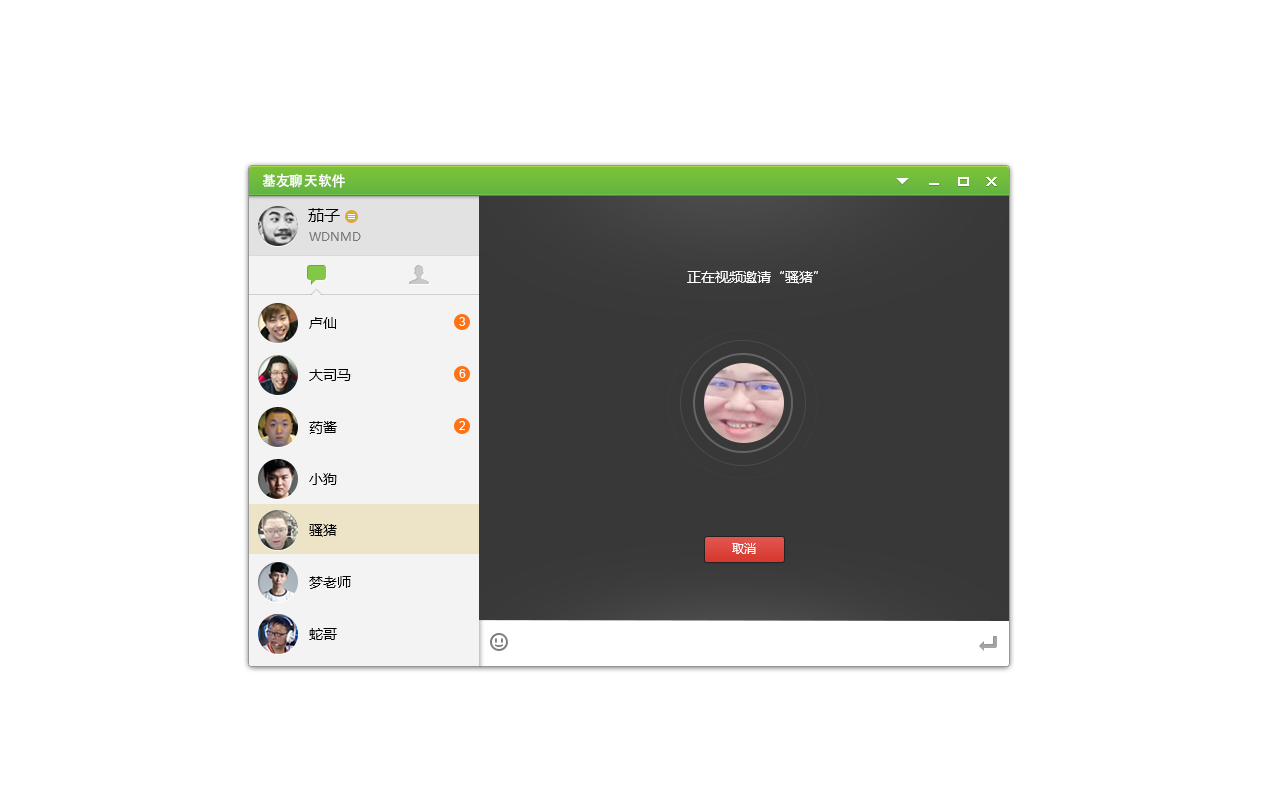
<style>
.page{position:relative;width:1280px;height:800px;background:#ffffff}
.page>*{position:absolute;margin:0}
.t1{font:14px "AdobeHeitiStd-Regular";color:#ffffff}
.t2{font:16px "MicrosoftYaHei";color:#000000}
.t3{font:12px "MicrosoftYaHei";color:#767676}
.t4{font:14px "MicrosoftYaHei";color:#ffffff}
.t5{font:14px "MicrosoftYaHei";color:#000000}
.t6{font:12px "ArialMT";color:#ffffff}
.t7{font:12px "MicrosoftYaHei";color:#ffffff}
</style>
<div class="page">
<p class="t1" style="left:262px;top:173px;width:83px;height:15px">基友聊天软件</p>
<p class="t2" style="left:308px;top:208px;width:32px;height:14px">茄子</p>
<p class="t3" style="left:309px;top:232px;width:52px;height:9px">WDNMD</p>
<p class="t4" style="left:687px;top:271px;width:131px;height:13px">正在视频邀请“骚猪”</p>
<p class="t5" style="left:309px;top:317px;width:27px;height:12px">卢仙</p>
<p class="t6" style="left:459px;top:317px;width:7px;height:9px">3</p>
<p class="t5" style="left:309px;top:369px;width:42px;height:12px">大司马</p>
<p class="t6" style="left:459px;top:369px;width:7px;height:9px">6</p>
<p class="t5" style="left:309px;top:421px;width:28px;height:13px">药酱</p>
<p class="t6" style="left:459px;top:421px;width:6px;height:9px">2</p>
<p class="t5" style="left:309px;top:473px;width:28px;height:12px">小狗</p>
<p class="t5" style="left:309px;top:524px;width:28px;height:13px">骚猪</p>
<p class="t7" style="left:732px;top:543px;width:24px;height:11px">取消</p>
<p class="t5" style="left:309px;top:576px;width:42px;height:13px">梦老师</p>
<p class="t5" style="left:309px;top:628px;width:28px;height:12px">蛇哥</p>
</div>
